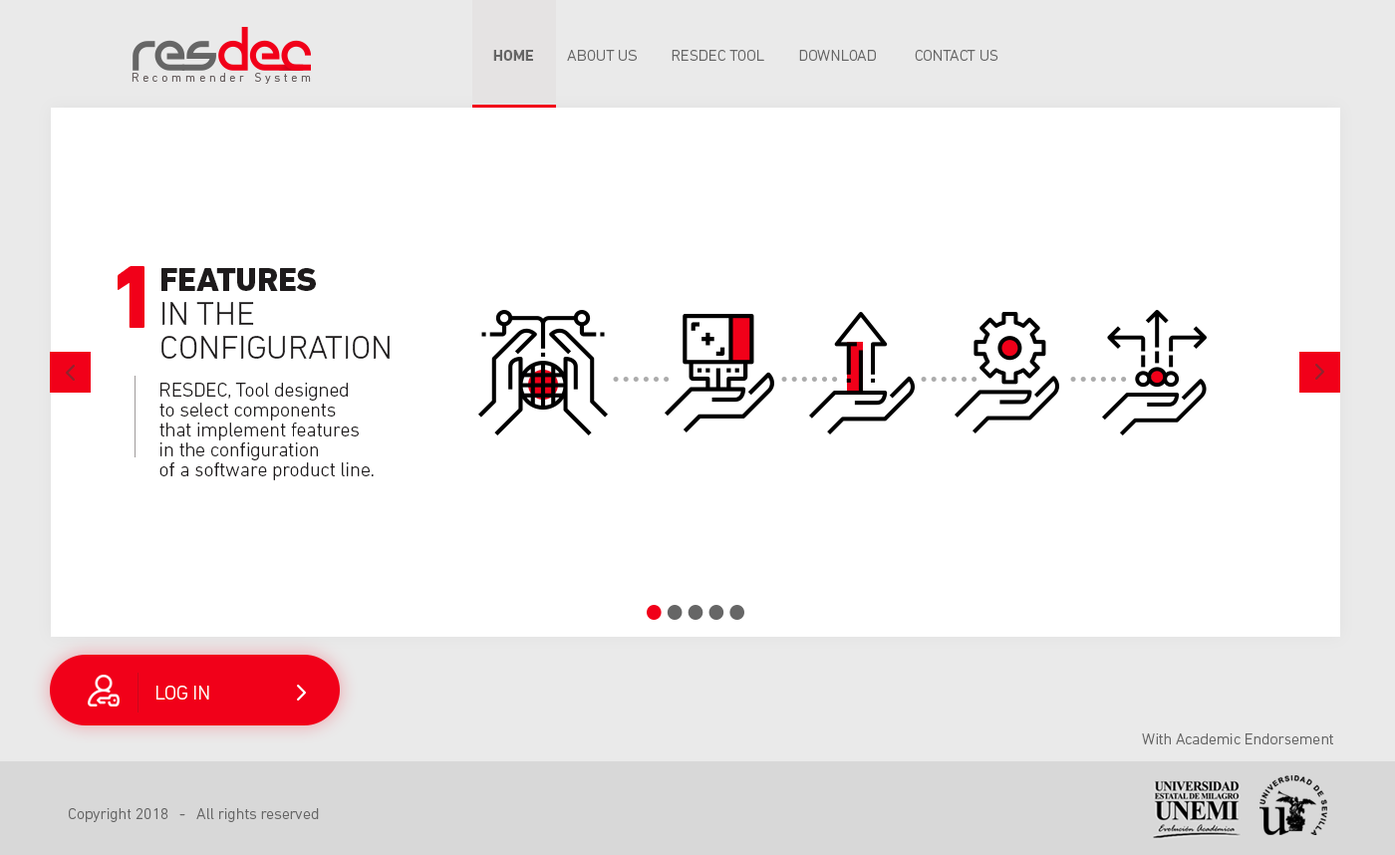
<style>
.page{position:relative;width:1395px;height:855px;background:#ffffff}
.page>*{position:absolute;margin:0}
.t1{font:15.9px "DINNextLTPro-Light";letter-spacing:-0.01em;color:#666666;text-transform:uppercase}
.t2{font:15.9px "DINNextLTPro-Bold";letter-spacing:-0.01em;color:#666666;text-transform:uppercase}
.t3{font:90.6px "DINNextLTPro-Heavy";letter-spacing:-0.01em;color:#f10019;text-transform:uppercase}
.t4{font:33.8px/33.8px "DINNextLTPro-Light";letter-spacing:-0.01em;color:#1e1b1c;text-transform:uppercase}
.t5{font:33.8px/33.8px "DINNextLTPro-Heavy";letter-spacing:-0.01em;color:#1e1b1c;text-transform:uppercase}
.t6{font:19.9px/19.9px "DINNextLTPro-Light";letter-spacing:-0.01em;color:#1e1b1c}
.t7{font:19.9px "DINNextLTPro-Light";letter-spacing:-0.01em;color:#ffffff;text-transform:uppercase}
.t8{font:15.9px "DINNextLTPro-Light";letter-spacing:-0.01em;color:#666666}
</style>
<div class="page">
<p class="t1" style="left:493px;top:50px;width:505px;height:11px"><span class="t2">Home</span>         About us         RESDEC Tool         Download          Contact us</p>
<p class="t3" style="left:118px;top:266px;width:26px;height:62px">1</p>
<p class="t4" style="left:161px;top:268px;width:229px;height:91px"><span class="t5">features <br></span>in the <br>configuration</p>
<p class="t6" style="left:159px;top:383px;width:215px;height:97px">RESDEC, Tool designed<br>to select components<br>that implement features<br>in the configuration<br>of a software product line.</p>
<p class="t7" style="left:156px;top:685px;width:53px;height:14px">Log in</p>
<p class="t8" style="left:1142px;top:733px;width:191px;height:11px">With Academic Endorsement</p>
<p class="t8" style="left:69px;top:808px;width:250px;height:14px">Copyright 2018   -   All rights reserved</p>
</div>
